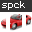
<style>
.page{position:relative;width:32px;height:32px;background:#ffffff}
.page>*{position:absolute;margin:0}
.t1{font:9px "Monaco";letter-spacing:0.06em;color:#ffffff}
</style>
<div class="page">
<p class="t1" style="left:2px;top:1px;width:23px;height:9px">spck</p>
</div>
